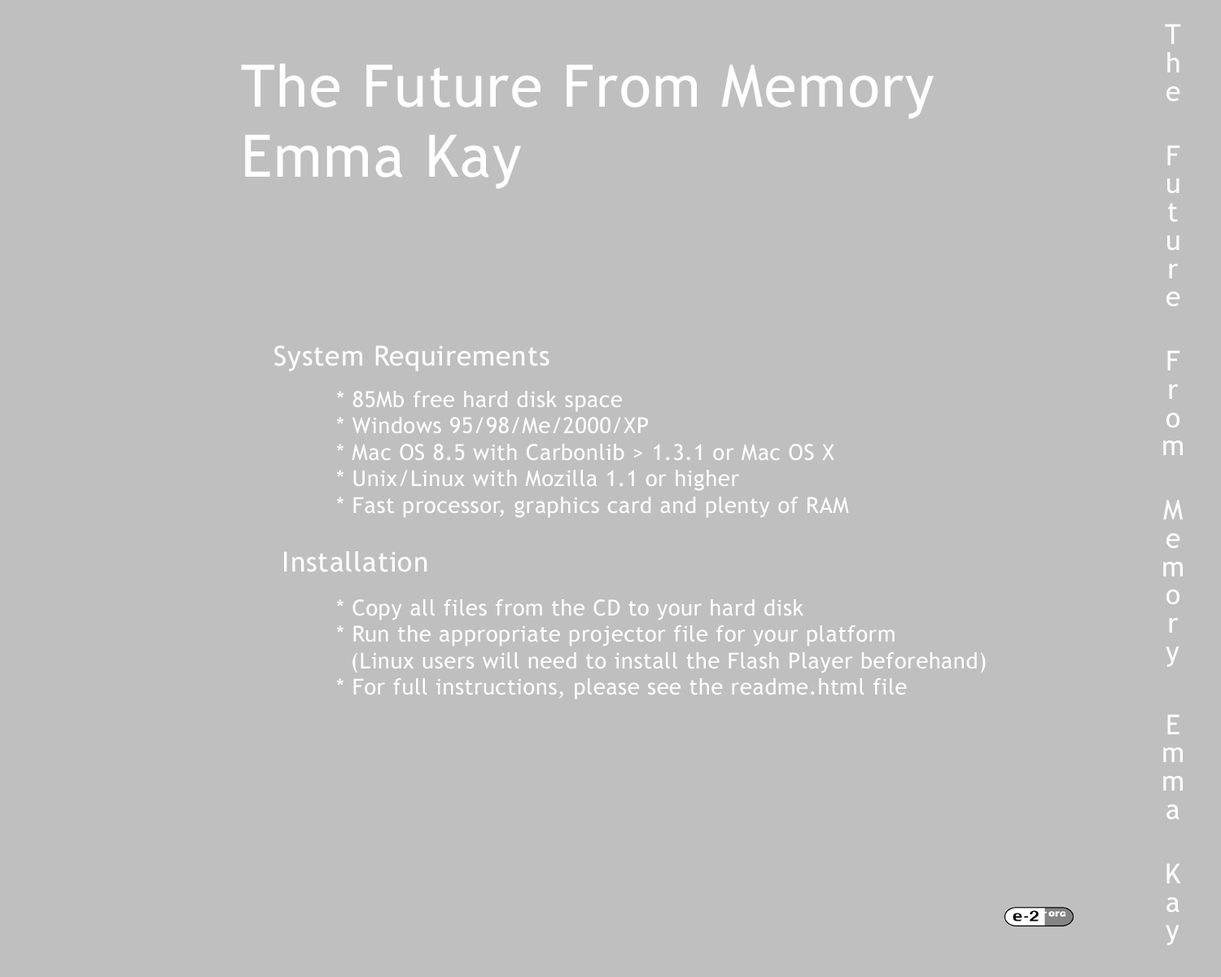
<style>
.page{position:relative;width:1221px;height:977px;background:#bfbfbf}
.page>*{position:absolute;margin:0}
.t1{font:27.6px "TrebuchetMS";letter-spacing:0.025em;color:#ffffff}
.t2{font:58.6px "TrebuchetMS";letter-spacing:0.025em;color:#ffffff}
.t3{font:22.1px "TrebuchetMS";letter-spacing:0.025em;color:#ffffff}
</style>
<div class="page">
<p class="t1" style="left:1163px;top:24px;width:20px;height:921px">The    Future    From    Memory     Emma    Kay</p>
<p class="t2" style="left:241px;top:63px;width:693px;height:126px">The Future From Memory<br>Emma Kay</p>
<p class="t1" style="left:274px;top:345px;width:275px;height:26px">System Requirements</p>
<p class="t3" style="left:336px;top:391px;width:513px;height:127px">* 85Mb free hard disk space<br>    * Windows 95/98/Me/2000/XP<br>    * Mac OS 8.5 with Carbonlib &gt; 1.3.1 or Mac OS X<br>    * Unix/Linux with Mozilla 1.1 or higher<br>    * Fast processor, graphics card and plenty of RAM</p>
<p class="t1" style="left:284px;top:551px;width:143px;height:21px">Installation</p>
<p class="t3" style="left:336px;top:599px;width:650px;height:100px">* Copy all files from the CD to your hard disk<br>    * Run the appropriate projector file for your platform<br>      (Linux users will need to install the Flash Player beforehand)<br>    * For full instructions, please see the readme.html file</p>
</div>
